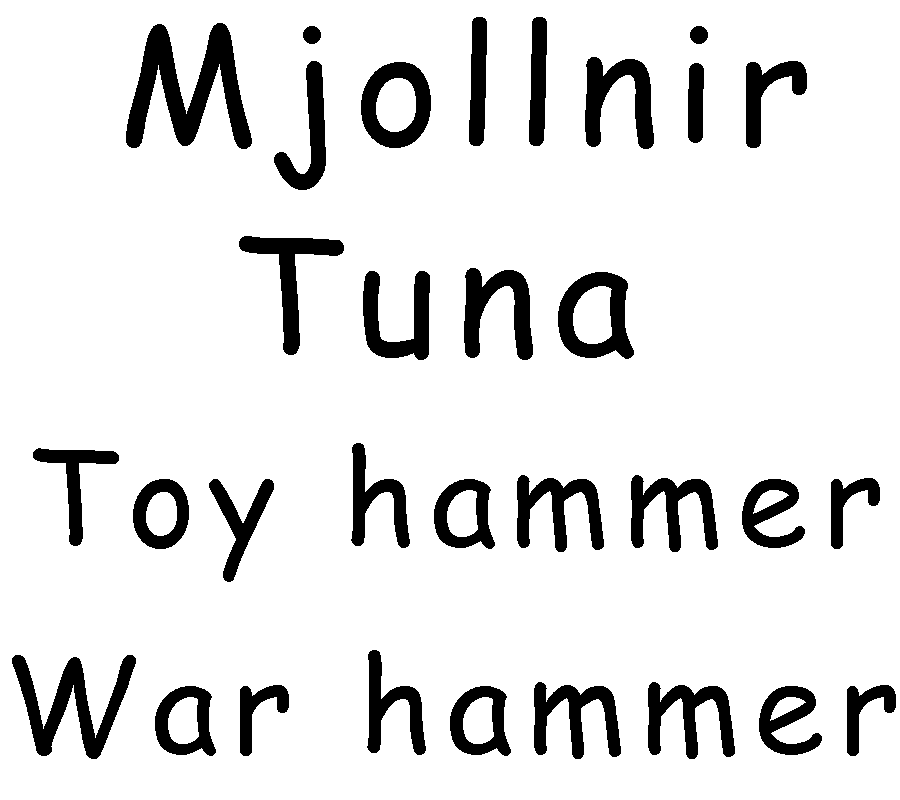
<style>
.page{position:relative;width:900px;height:800px;background:#ffffff}
.page>*{position:absolute;margin:0}
.t1{font:160px "ComicSansMS";letter-spacing:0.1em;color:#000000}
.t2{font:130px "ComicSansMS";letter-spacing:0.1em;color:#000000}
</style>
<div class="page">
<p class="t1" style="left:126px;top:17px;width:681px;height:173px">Mjollnir</p>
<p class="t1" style="left:239px;top:236px;width:395px;height:124px">Tuna</p>
<p class="t2" style="left:33px;top:443px;width:847px;height:139px">Toy hammer</p>
<p class="t2" style="left:12px;top:650px;width:884px;height:109px">War hammer</p>
</div>
